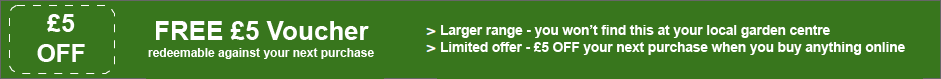
<style>
.page{position:relative;width:941px;height:79px;background:#38761d}
.page>*{position:absolute;margin:0}
.t1{font:24.7px "Arial-BoldMT";color:#ffffff}
.t2{font:26px "Arial-BoldMT";color:#ffffff}
.t3{font:13.5px "Arial-BoldMT";color:#ffffff}
.t4{font:12px "Arial-BoldMT";color:#ffffff}
</style>
<div class="page">
<p class="t1" style="left:37px;top:14px;width:48px;height:48px;text-align:center">£5<br>OFF</p>
<p class="t2" style="left:156px;top:21px;width:213px;height:19px">FREE £5 Voucher</p>
<p class="t3" style="left:441px;top:25px;width:389px;height:13px">Larger range - you won’t find this at your local garden centre</p>
<p class="t4" style="left:148px;top:48px;width:226px;height:11px">redeemable against your next purchase</p>
<p class="t3" style="left:441px;top:42px;width:464px;height:13px">Limited offer - £5 OFF your next purchase when you buy anything online</p>
</div>
